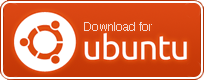
<style>
.page{position:relative;width:204px;height:80px}
.page>*{position:absolute;margin:0}
.t1{font:12px "Helvetica";color:#f3d5cf}
</style>
<div class="page">
<p class="t1" style="left:84px;top:22px;width:68px;height:9px">Download for</p>
</div>
